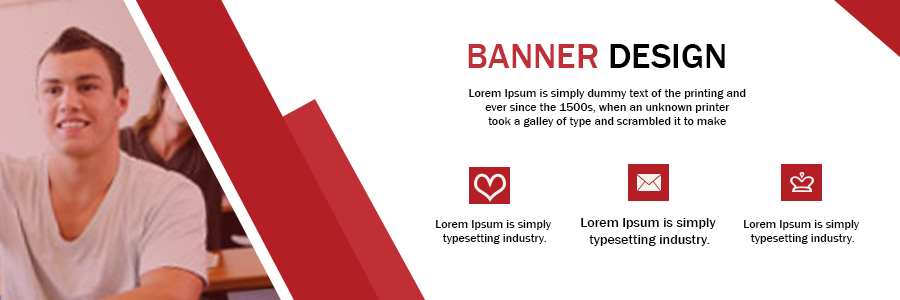
<style>
.page{position:relative;width:900px;height:300px;background:#ffffff}
.page>*{position:absolute;margin:0}
.t1{font:36px "FranklinGothic-Medium";color:#bf2f35}
.t2{font:36px "FranklinGothic-Medium";color:#000000}
.t3{font:12px "FranklinGothic-Medium";color:#000000}
.t4{font:14px "FranklinGothic-Medium";color:#000000}
</style>
<div class="page">
<p class="t1" style="left:468px;top:44px;width:257px;height:24px">BANNER <span class="t2">DESIGN</span></p>
<p class="t3" style="left:469px;top:89px;width:277px;height:38px;text-align:center">Lorem Ipsum is simply dummy text of the printing and <br>ever since the 1500s, when an unknown printer <br>took a galley of type and scrambled it to make</p>
<p class="t3" style="left:436px;top:220px;width:115px;height:24px;text-align:center">Lorem Ipsum is simply <br>typesetting industry.</p>
<p class="t4" style="left:581px;top:218px;width:135px;height:28px;text-align:center">Lorem Ipsum is simply <br>typesetting industry.</p>
<p class="t3" style="left:744px;top:220px;width:115px;height:24px;text-align:center">Lorem Ipsum is simply <br>typesetting industry.</p>
</div>
